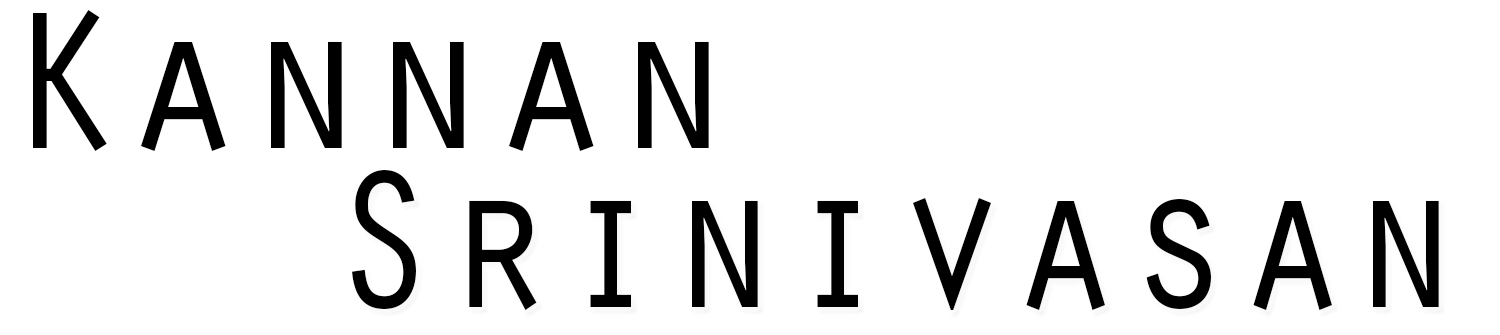
<style>
.page{position:relative;width:1500px;height:335px;background:#ffffff}
.page>*{position:absolute;margin:0}
.t1{font:202.9px "OratorStd";color:#000000}
.t2{font:202.9px "OratorStd";color:#000000;scale:0.93 1}
</style>
<div class="page">
<p class="t1" style="left:33px;top:10px;width:676px;height:141px">Kannan</p>
<p class="t2" style="left:352px;top:170px;width:1087px;height:140px">Srinivasan</p>
</div>
